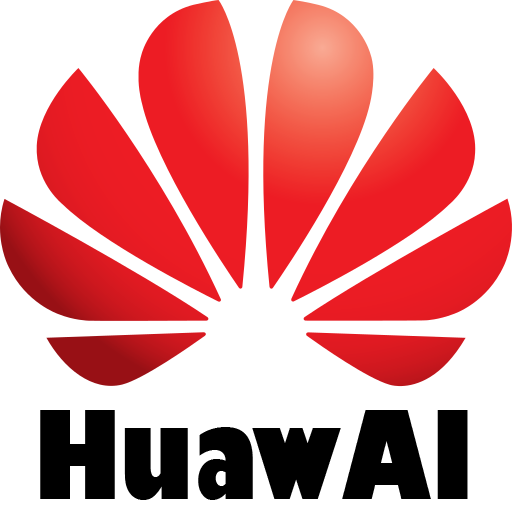
<style>
.page{position:relative;width:512px;height:521px;background:#ffffff}
.page>*{position:absolute;margin:0}
.t1{font:120px "GillSans-UltraBold";color:#000000}
</style>
<div class="page">
<p class="t1" style="left:40px;top:410px;width:428px;height:90px">HuawAI</p>
</div>
